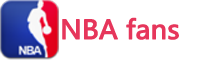
<style>
.page{position:relative;width:200px;height:60px;background:#ffffff}
.page>*{position:absolute;margin:0}
.t1{font:25.7px "MicrosoftYaHei";letter-spacing:-0.02em;color:#e6365b;font-weight:bold;scale:1.04 1}
</style>
<div class="page">
<p class="t1" style="left:62px;top:17px;width:117px;height:23px">NBA fans</p>
</div>
